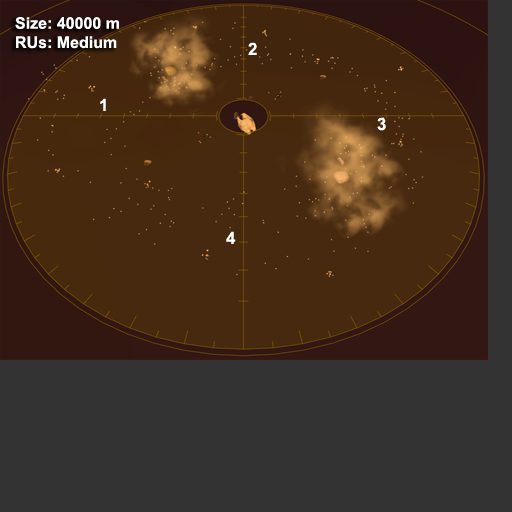
<style>
.page{position:relative;width:512px;height:512px;background:#333333}
.page>*{position:absolute;margin:0}
.t1{font:16px "Arial-BoldMT";color:#ffffff}
.t2{font:17px "Arial-BoldMT";color:#ffffff}
</style>
<div class="page">
<p class="t1" style="left:15px;top:17px;width:104px;height:32px">Size: 40000 m<br>RUs: Medium</p>
<p class="t2" style="left:248px;top:42px;width:9px;height:13px">2</p>
<p class="t2" style="left:100px;top:98px;width:6px;height:13px">1</p>
<p class="t2" style="left:377px;top:117px;width:9px;height:14px">3</p>
<p class="t2" style="left:226px;top:231px;width:10px;height:13px">4</p>
</div>
